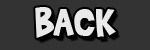
<style>
.page{position:relative;width:150px;height:50px;background:#333333}
.page>*{position:absolute;margin:0}
.t1{font:47px "BradyBunchRemastered";color:#ffffff}
</style>
<div class="page">
<p class="t1" style="left:35px;top:7px;width:81px;height:31px">BACK</p>
<p class="t1" style="left:36px;top:8px;width:81px;height:31px">BACK</p>
</div>
